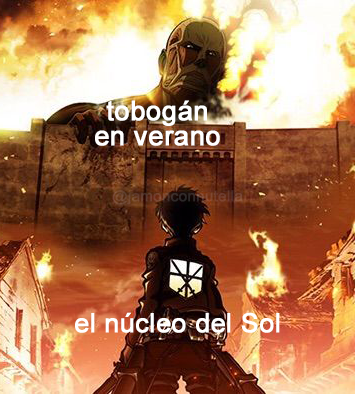
<style>
.page{position:relative;width:355px;height:394px}
.page>*{position:absolute;margin:0}
.t1{font:27.1px "ArialMT";color:#ffffff;font-weight:bold}
.t2{font:15px "ArialMT";font-weight:bold}
.t3{font:26.5px "ArialMT";color:#ffffff;font-weight:bold}
</style>
<div class="page">
<p class="t1" style="left:95px;top:100px;width:125px;height:46px;text-align:center">tobogán<br>en verano</p>
<p class="t2" style="left:112px;top:190px;width:131px;height:15px">@jamonconnutella</p>
<p class="t3" style="left:75px;top:312px;width:205px;height:21px">el núcleo del Sol</p>
</div>
